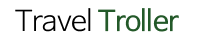
<style>
.page{position:relative;width:200px;height:40px;background:#ffffff}
.page>*{position:absolute;margin:0}
.t1{font:28px "NanumBarunGothicOTF";letter-spacing:-0.025em;color:#235929}
.t2{font:28px "NanumBarunGothicOTFLight";letter-spacing:-0.025em;color:#000000}
</style>
<div class="page">
<p class="t1" style="left:15px;top:8px;width:164px;height:24px"><span class="t2">Travel </span>Troller</p>
</div>
